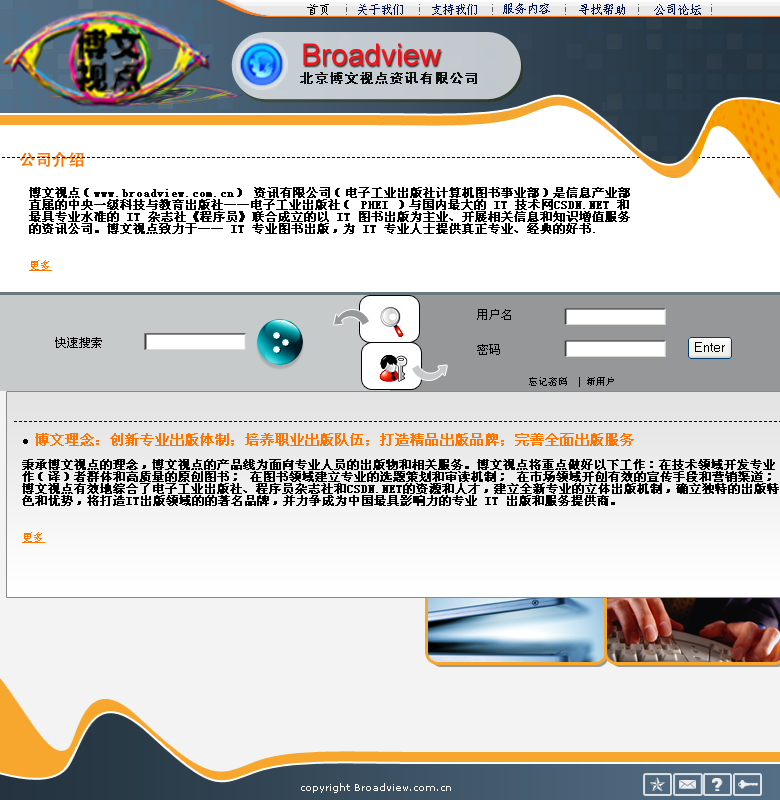
<style>
.page{position:relative;width:780px;height:800px;background:#ffffff}
.page>*{position:absolute;margin:0}
.t1{font:12px "FangSong_GB2312";color:#010000}
.t2{font:12px "FangSong_GB2312";color:#011348}
.t3{font:12px "SimHei";color:#011348}
.t4{font:30px "ArialMT";color:#f61117}
.t5{font:14px "SimHei";color:#0d0e0e;text-transform:uppercase;font-weight:bold}
.t6{font:10px "Verdana";color:#000000}
.t7{font:16px "SimHei";color:#ff7500;font-weight:bold}
.t8{font:12px/12px "SimSun";color:#000000;font-weight:bold}
.t9{font:11px/12px "SimSun";color:#ff7500;text-decoration:underline}
.t10{font:12px "SimSun";color:#000000}
.t11{font:10px "SimSun";color:#000000}
.t12{font:11px/12px "Tahoma";color:#000000}
.t13{font:14px/12px "SimSun";color:#ff7500;font-weight:bold}
.t14{font:10px "Verdana";color:#ffffff}
</style>
<div class="page">
<p class="t1" style="left:307px;top:4px;width:22px;height:11px">首页</p>
<p class="t2" style="left:358px;top:4px;width:45px;height:11px">关于我们</p>
<p class="t2" style="left:432px;top:4px;width:45px;height:11px"><span class="t3">  </span>支持我们</p>
<p class="t2" style="left:503px;top:3px;width:47px;height:11px"><span class="t3">   </span> 服务内容</p>
<p class="t2" style="left:579px;top:4px;width:46px;height:11px">寻找帮助</p>
<p class="t2" style="left:654px;top:4px;width:47px;height:11px">公司论坛</p>
<p class="t4" style="left:303px;top:43px;width:138px;height:23px">Broadview</p>
<p class="t5" style="left:300px;top:72px;width:177px;height:12px">北京博文视点资讯有限公司</p>
<p class="t6" style="left:2px;top:157px;width:773px;height:1px">-----------------------------------------------------------------------------------------------------------------------------------------------------------</p>
<p class="t7" style="left:20px;top:152px;width:64px;height:15px">公司介绍</p>
<p class="t8" style="left:29px;top:187px;width:601px;height:84px">博文视点（www.broadview.com.cn） 资讯有限公司（电子工业出版社计算机图书事业部）是信息产业部直属的中央一级科技与教育出版社——电子工业出版社（ PHEI ）与国内最大的 IT 技术网CSDN.NET 和最具专业水准的 IT 杂志社《程序员》联合成立的以 IT 图书出版为主业、开展相关信息和知识增值服务的资讯公司。博文视点致力于—— IT 专业图书出版，为 IT 专业人士提供真正专业、经典的好书. <br><br><br><span class="t9">更多</span></p>
<p class="t10" style="left:477px;top:309px;width:34px;height:11px">用户名</p>
<p class="t10" style="left:55px;top:337px;width:47px;height:11px">快速搜索</p>
<p class="t10" style="left:477px;top:344px;width:23px;height:11px">密码</p>
<p class="t11" style="left:529px;top:377px;width:85px;height:10px">忘记密码 <span class="t6"> | </span>新用户</p>
<p class="t6" style="left:14px;top:421px;width:768px;height:1px">----------------------------------------------------------------------------------------------------------------------------------------------------------</p>
<p class="t8" style="left:22px;top:433px;width:757px;height:110px"><span class="t12">●  </span><span class="t13">博文理念：创新专业出版体制；培养职业出版队伍；打造精品出版品牌；完善全面出版服务<br><br></span>秉承博文视点的理念，博文视点的产品线为面向专业人员的出版物和相关服务。博文视点将重点做好以下工作：在技术领域开发专业作（译）者群体和高质量的原创图书； 在图书领域建立专业的选题策划和审读机制； 在市场领域开创有效的宣传手段和营销渠道；博文视点有效地综合了电子工业出版社、程序员杂志社和CSDN.NET的资源和人才，建立全新专业的立体出版机制，确立独特的出版特色和优势，将打造IT出版领域的的著名品牌，并力争成为中国最具影响力的专业 IT 出版和服务提供商。<br><br><br><span class="t9">更多</span></p>
<p class="t14" style="left:301px;top:783px;width:150px;height:10px">copyright Broadview.com.cn</p>
</div>
